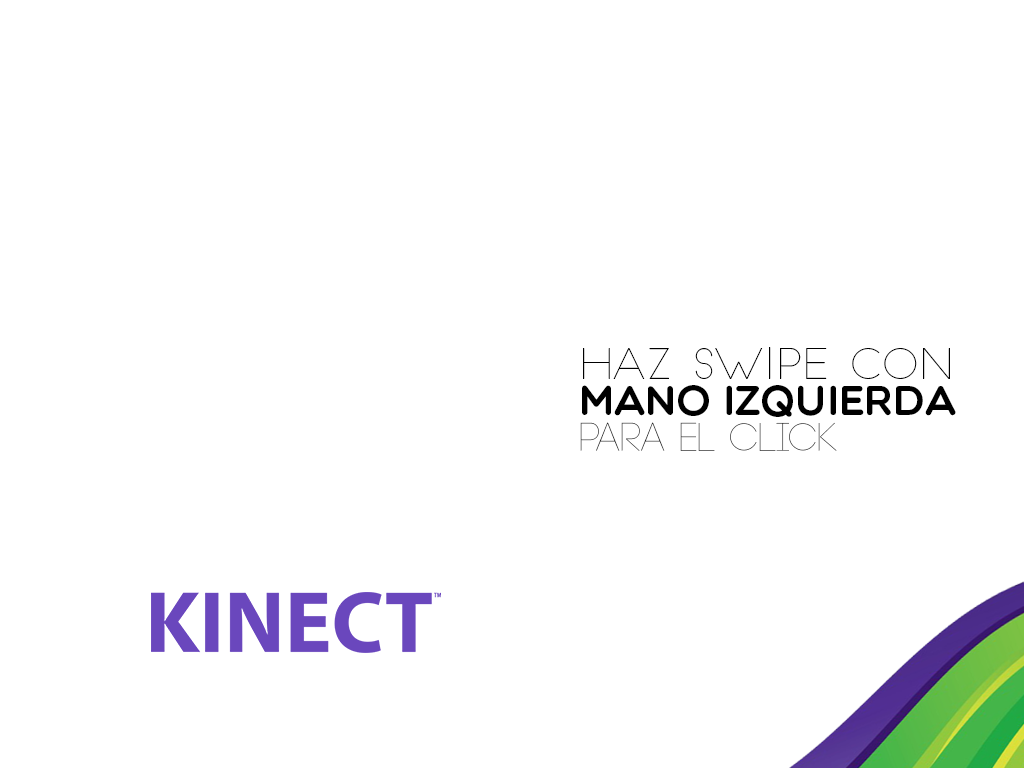
<style>
.page{position:relative;width:1024px;height:768px;background:#ffffff}
.page>*{position:absolute;margin:0}
.t1{font:42px/18px "Multicolore";color:#000000}
.t2{font:42px/18px "SlimJoe";color:#000000}
.t3{font:40px/18px "Code-Light";color:#000000}
</style>
<div class="page">
<p class="t1" style="left:580px;top:347px;width:376px;height:104px"><span class="t2">HAZ SWIPE CON <br><br></span>MANO IZQUIERDA<br> <br><span class="t3">PARA EL CLICK</span></p>
</div>
